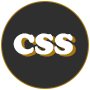
<style>
.page{position:relative;width:90px;height:90px;background:#2f2f2f}
.page>*{position:absolute;margin:0}
.t1{font:30px "CooperBlack";color:#ffffff}
.t2{font:30px "CooperBlack"}
</style>
<div class="page">
<p class="t1" style="left:13px;top:33px;width:60px;height:22px">CSS</p>
<p class="t2" style="left:16px;top:35px;width:60px;height:22px">CSS</p>
</div>
